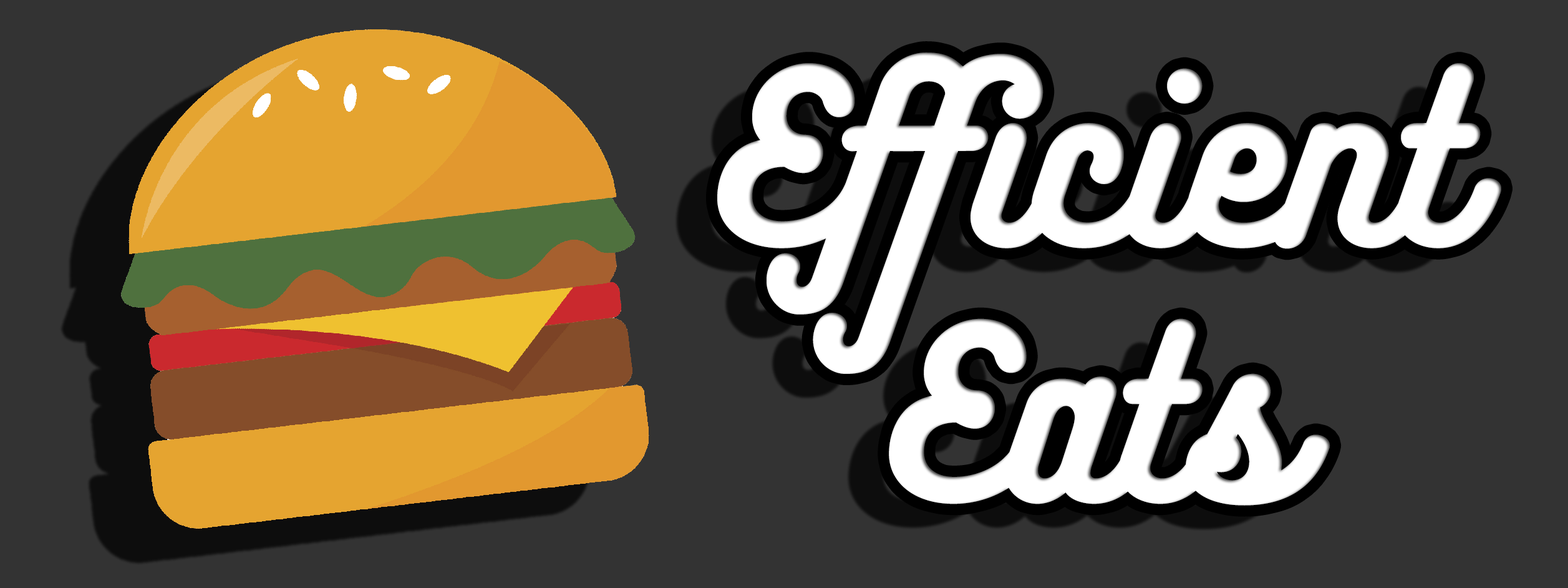
<style>
.page{position:relative;width:1568px;height:588px;background:#333333}
.page>*{position:absolute;margin:0}
.t1{font:212.9px "BukhariScript-Regular";color:#ffffff}
</style>
<div class="page">
<p class="t1" style="left:717px;top:52px;width:784px;height:453px;text-align:center">Efficient<br>Eats</p>
</div>
